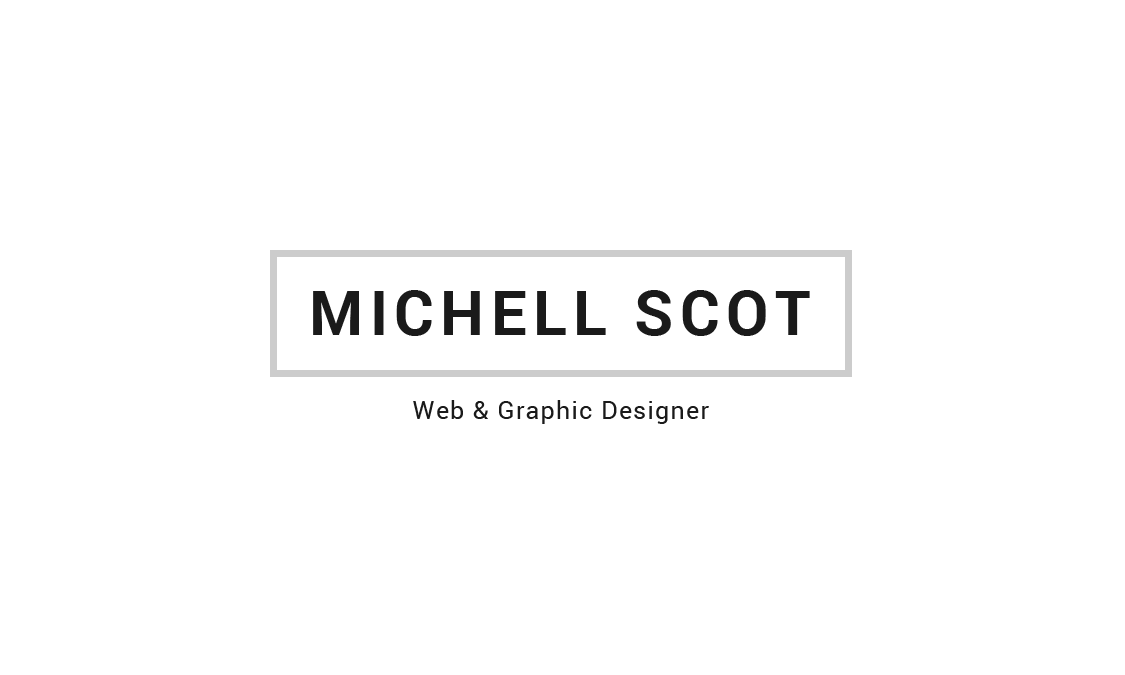
<style>
.page{position:relative;width:1125px;height:675px;background:#ffffff}
.page>*{position:absolute;margin:0}
.t1{font:62.5px "Roboto-Bold";letter-spacing:0.1em;color:#1a1a1a;text-transform:uppercase}
.t2{font:25px "Roboto-Regular";letter-spacing:0.05em;color:#1a1a1a}
</style>
<div class="page">
<p class="t1" style="left:313px;top:290px;width:497px;height:46px">Michell SCOT</p>
<p class="t2" style="left:413px;top:400px;width:296px;height:24px">Web &amp; Graphic Designer</p>
</div>
